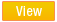
<style>
.page{position:relative;width:57px;height:22px}
.page>*{position:absolute;margin:0}
.t1{font:14px "HelveticaNeueLTStd-Cn";letter-spacing:0.04em;color:#ffffff}
</style>
<div class="page">
<p class="t1" style="left:16px;top:6px;width:26px;height:10px">View</p>
</div>
